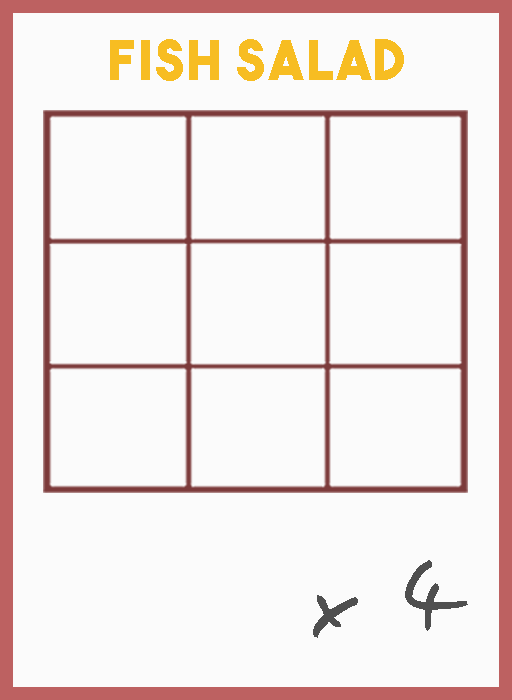
<style>
.page{position:relative;width:512px;height:700px;background:#fbfbfb}
.page>*{position:absolute;margin:0}
.t1{font:54.5px "TheBoldFont";letter-spacing:0.05em;color:#f7bd22}
.t2{font:106.1px "EasySpeech";letter-spacing:0.05em;color:#4f4f4f}
</style>
<div class="page">
<p class="t1" style="left:110px;top:39px;width:294px;height:42px">fish salad</p>
<p class="t2" style="left:313px;top:560px;width:155px;height:78px">x 4</p>
</div>
